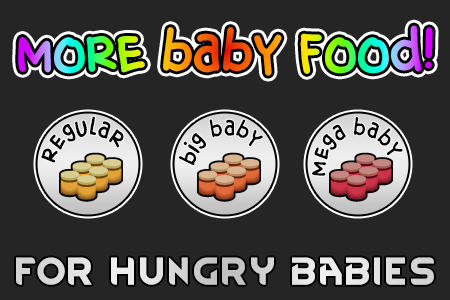
<style>
.page{position:relative;width:450px;height:300px;background:#252525}
.page>*{position:absolute;margin:0}
.t1{font:65px "CRUNCHYSTICK"}
.t2{font:26.8px "CRUNCHYSTICK";color:#000000;scale:1.06 1}
.t3{font:25.1px "CRUNCHYSTICK";color:#000000;scale:1.08 1}
.t4{font:33px "RimWordFont";color:#dddddd}
</style>
<div class="page">
<p class="t1" style="left:18px;top:25px;width:415px;height:51px">more BABY FOOD!</p>
<p class="t1" style="left:18px;top:25px;width:415px;height:51px">more BABY FOOD!</p>
<p class="t2" style="left:41px;top:116px;width:83px;height:47px;rotate:82deg">regular</p>
<p class="t3" style="left:178px;top:119px;width:85px;height:47px;rotate:79deg">big baby</p>
<p class="t3" style="left:312px;top:117px;width:91px;height:59px;rotate:80deg">mega baby</p>
<p class="t4" style="left:16px;top:257px;width:418px;height:28px">For Hungry Babies</p>
</div>
